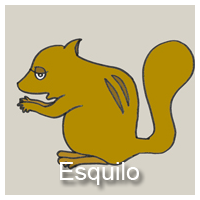
<style>
.page{position:relative;width:200px;height:200px;background:#d7d3c8}
.page>*{position:absolute;margin:0}
.t1{font:25px "ArialMT";color:#ffffff}
</style>
<div class="page">
<p class="t1" style="left:60px;top:162px;width:79px;height:23px">Esquilo</p>
</div>
